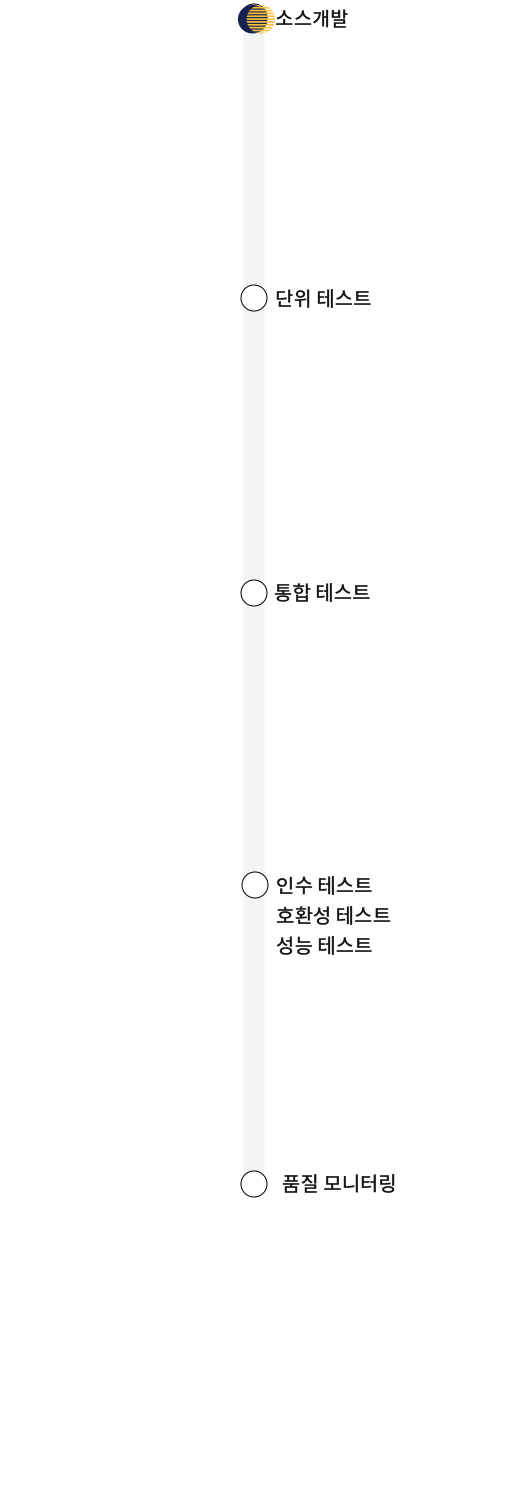
<style>
.page{position:relative;width:508px;height:1500px;background:#ffffff}
.page>*{position:absolute;margin:0}
.t1{font:20px "NotoSansKR-Medium";color:#161616}
.t2{font:20px/30px "NotoSansKR-Medium";color:#161616}
</style>
<div class="page">
<p class="t1" style="left:276px;top:9px;width:72px;height:19px">소스개발</p>
<p class="t1" style="left:276px;top:289px;width:95px;height:19px">단위 테스트</p>
<p class="t1" style="left:274px;top:583px;width:96px;height:19px">통합 테스트</p>
<p class="t2" style="left:276px;top:876px;width:115px;height:79px">인수 테스트<br>호환성 테스트<br>성능 테스트</p>
<p class="t1" style="left:282px;top:1174px;width:113px;height:19px">품질 모니터링</p>
</div>
